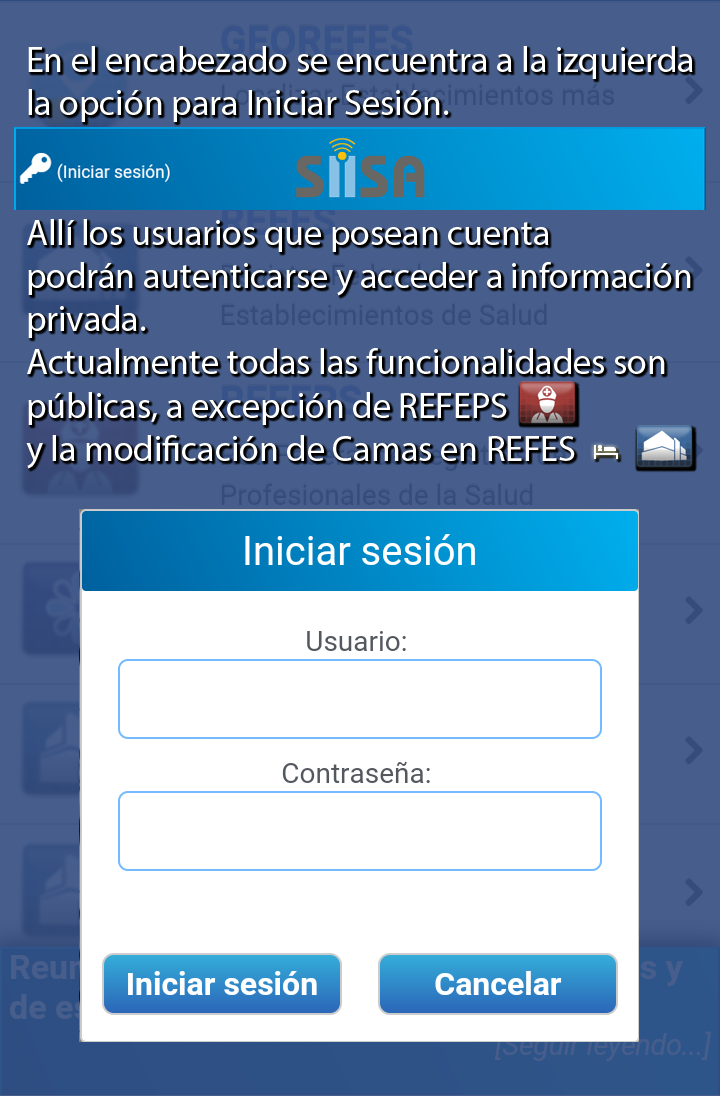
<style>
.page{position:relative;width:720px;height:1096px;background:#ffffff}
.page>*{position:absolute;margin:0}
.t1{font:36px "MyriadPro-Regular";color:#ffffff}
</style>
<div class="page">
<p class="t1" style="left:26px;top:46px;width:667px;height:423px">En el encabezado se encuentra a la izquierda<br>la opción para Iniciar Sesión.<br><br><br>Allí los usuarios que posean cuenta<br>podrán autenticarse y acceder a información<br>privada.<br>Actualmente todas las funcionalidades son<br>públicas, a excepción de REFEPS<br>y la modificación de Camas en REFES</p>
</div>
